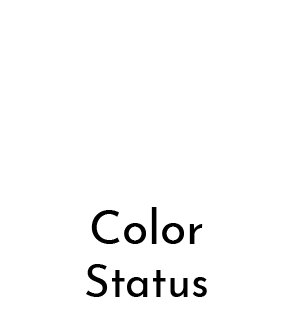
<style>
.page{position:relative;width:300px;height:312px;background:#ffffff}
.page>*{position:absolute;margin:0}
.t1{font:44px "JosefinSans-Regular";color:#000000}
.t2{font:48px "JosefinSans-Regular";color:#000000}
</style>
<div class="page">
<p class="t1" style="left:86px;top:207px;width:121px;height:90px;text-align:center"><span class="t2">Color<br></span>Status</p>
</div>
